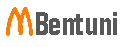
<style>
.page{position:relative;width:120px;height:47px;background:#ffffff}
.page>*{position:absolute;margin:0}
.t1{font:40.9px "CosmicPlain";letter-spacing:-0.025em;color:#fc7d01}
.t2{font:31.9px "FolioBT-BoldCondensed";letter-spacing:-0.025em;color:#585858}
</style>
<div class="page">
<p class="t1" style="left:6px;top:7px;width:27px;height:29px">M</p>
<p class="t2" style="left:36px;top:12px;width:81px;height:23px">Bentuni</p>
</div>
